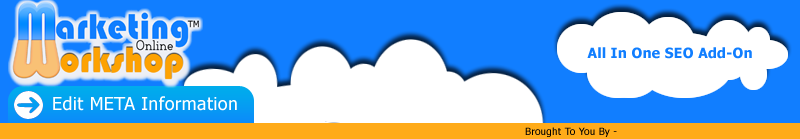
<style>
.page{position:relative;width:800px;height:139px;background:#117eff}
.page>*{position:absolute;margin:0}
.t1{font:14px "Tahoma-Bold";letter-spacing:0.02em;color:#107eff}
.t2{font:18px "Tahoma";letter-spacing:0.02em;color:#ffffff}
.t3{font:10px "Tahoma";letter-spacing:0.02em;color:#000000}
</style>
<div class="page">
<p class="t1" style="left:587px;top:47px;width:165px;height:12px">All In One SEO Add-On</p>
<p class="t2" style="left:53px;top:96px;width:184px;height:15px">Edit META Information</p>
<p class="t3" style="left:525px;top:127px;width:92px;height:10px">Brought To You By -</p>
</div>
